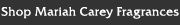
<style>
.page{position:relative;width:180px;height:25px;background:#333333}
.page>*{position:absolute;margin:0}
.t1{font:12px "FrizQua-Regu";letter-spacing:0.025em;color:#ffffff}
</style>
<div class="page">
<p class="t1" style="left:1px;top:7px;width:178px;height:12px">Shop Mariah Carey Fragrances</p>
</div>
